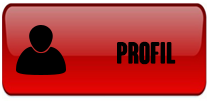
<style>
.page{position:relative;width:210px;height:101px}
.page>*{position:absolute;margin:0}
.t1{font:30px "ColunaRounded-CondensedBold";color:#000000}
</style>
<div class="page">
<p class="t1" style="left:117px;top:41px;width:59px;height:24px">profil</p>
</div>
